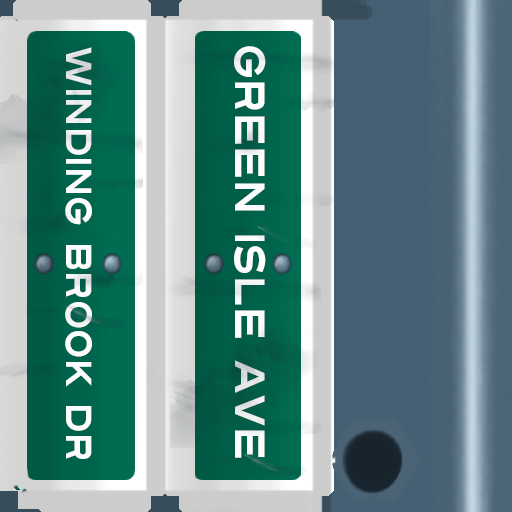
<style>
.page{position:relative;width:512px;height:512px}
.page>*{position:absolute;margin:0}
.t1{font:36px "Turnpike";color:#fefeff;scale:0.75 1}
.t2{font:42px "Turnpike";color:#fefeff;scale:0.75 1}
</style>
<div class="page">
<p class="t1" style="left:65px;top:47px;width:27px;height:412px;rotate:90deg">Winding Brook Dr</p>
<p class="t2" style="left:234px;top:46px;width:32px;height:412px;rotate:90deg">Green isle Ave</p>
</div>
